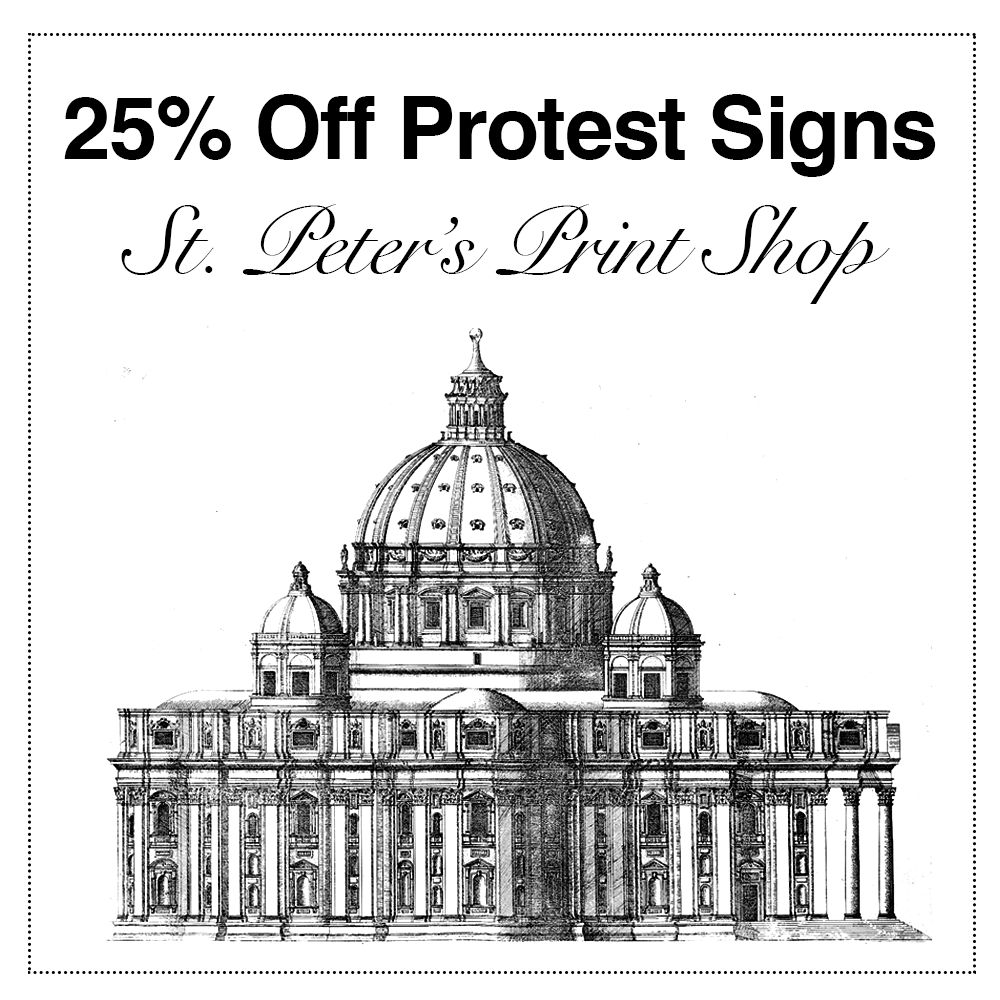
<style>
.page{position:relative;width:1000px;height:1000px;background:#ffffff}
.page>*{position:absolute;margin:0}
.t1{font:94.9px "SnellRoundhand";letter-spacing:-0.02em;color:#000000}
.t2{font:87.2px "Helvetica-Bold";letter-spacing:-0.02em;color:#000000}
</style>
<div class="page">
<p class="t1" style="left:64px;top:94px;width:872px;height:210px;text-align:center"><span class="t2">25% Off Protest Signs<br></span>St. Peter’s Print Shop</p>
</div>
